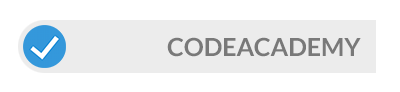
<style>
.page{position:relative;width:400px;height:92px;background:#ffffff}
.page>*{position:absolute;margin:0}
.t1{font:24.9px "Lato-Bold";color:#797979}
</style>
<div class="page">
<p class="t1" style="left:167px;top:37px;width:194px;height:20px">CODEACADEMY</p>
</div>
